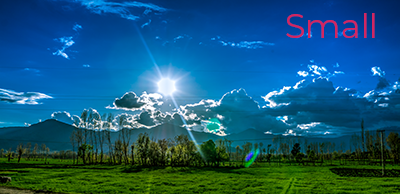
<style>
.page{position:relative;width:400px;height:194px}
.page>*{position:absolute;margin:0}
.t1{font:33.3px "Montserrat-Regular";color:#d22661}
</style>
<div class="page">
<p class="t1" style="left:286px;top:13px;width:89px;height:25px">Small</p>
</div>
